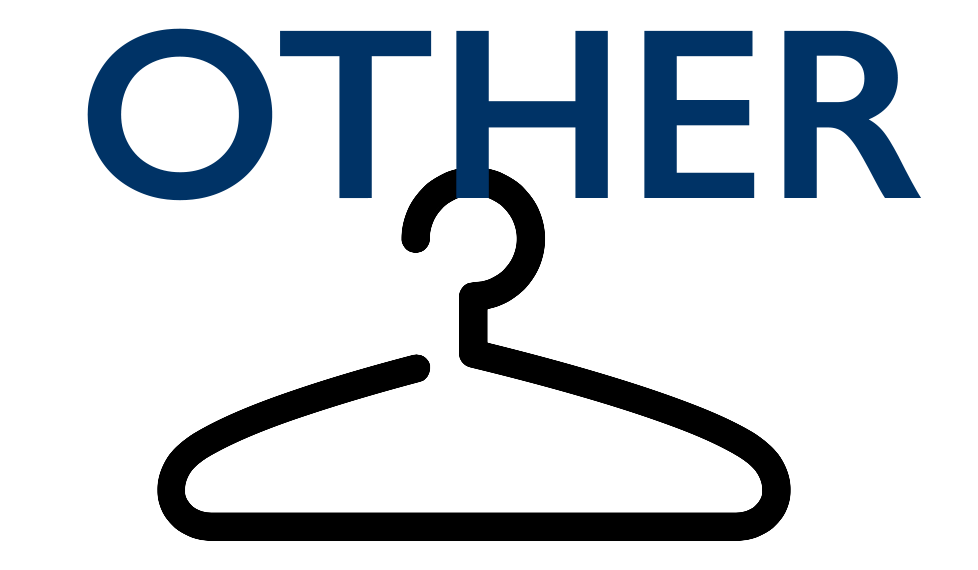
<style>
.page{position:relative;width:978px;height:570px;background:#ffffff}
.page>*{position:absolute;margin:0}
.t1{font:245.4px "GillSans-SemiBold";color:#003366}
</style>
<div class="page">
<p class="t1" style="left:87px;top:28px;width:835px;height:173px">OTHER</p>
</div>
